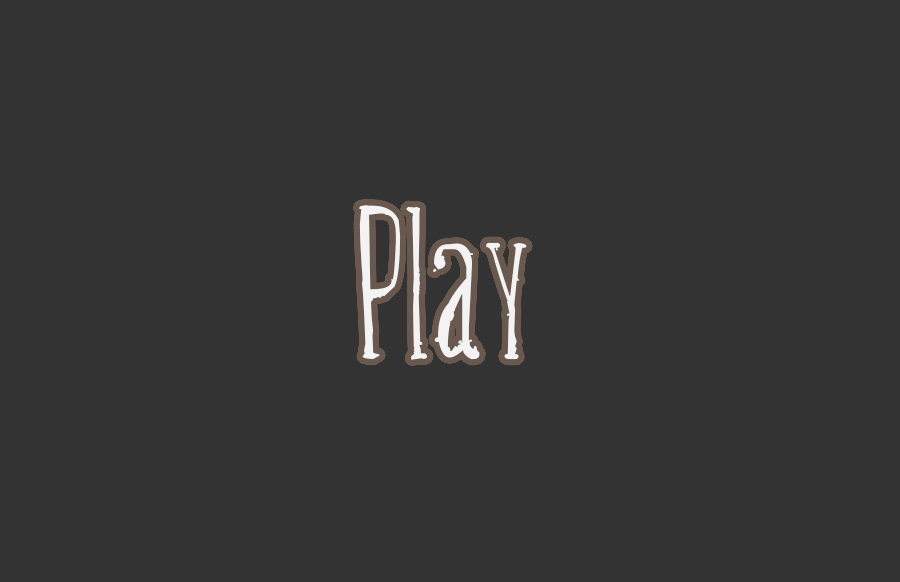
<style>
.page{position:relative;width:900px;height:582px;background:#333333}
.page>*{position:absolute;margin:0}
.t1{font:166.7px "Belisaplumillamanual";color:#f3f3f3}
</style>
<div class="page">
<p class="t1" style="left:359px;top:205px;width:168px;height:155px">Play</p>
</div>
